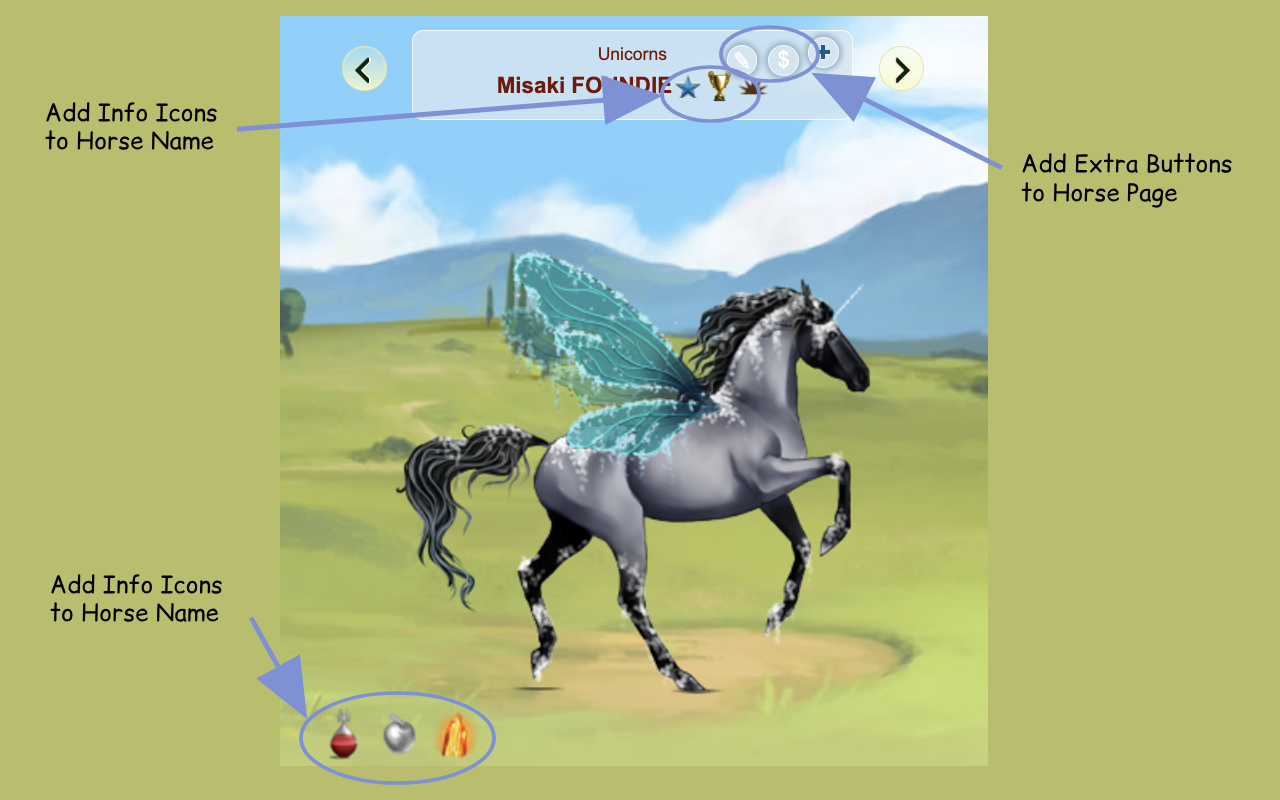
<style>
.page{position:relative;width:1280px;height:800px;background:#b8be6e}
.page>*{position:absolute;margin:0}
.t1{font:24px "ComicRelief";color:#000000}
</style>
<div class="page">
<p class="t1" style="left:45px;top:102px;width:172px;height:48px">Add Info Icons<br>to Horse Name</p>
<p class="t1" style="left:1021px;top:153px;width:211px;height:56px">Add Extra Buttons<br>to Horse Page</p>
<p class="t1" style="left:50px;top:574px;width:172px;height:48px">Add Info Icons<br>to Horse Name</p>
</div>
